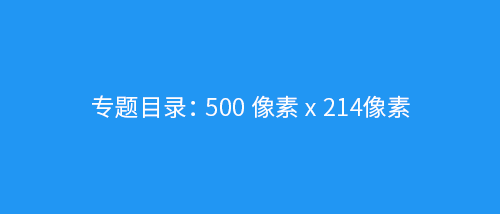
<style>
.page{position:relative;width:500px;height:214px;background:#2196f3}
.page>*{position:absolute;margin:0}
.t1{font:24px "SourceHanSansCN-Normal";letter-spacing:0.01em;color:#fefefe}
</style>
<div class="page">
<p class="t1" style="left:92px;top:95px;width:318px;height:23px">专题目录： 500 像素 x 214像素</p>
</div>
